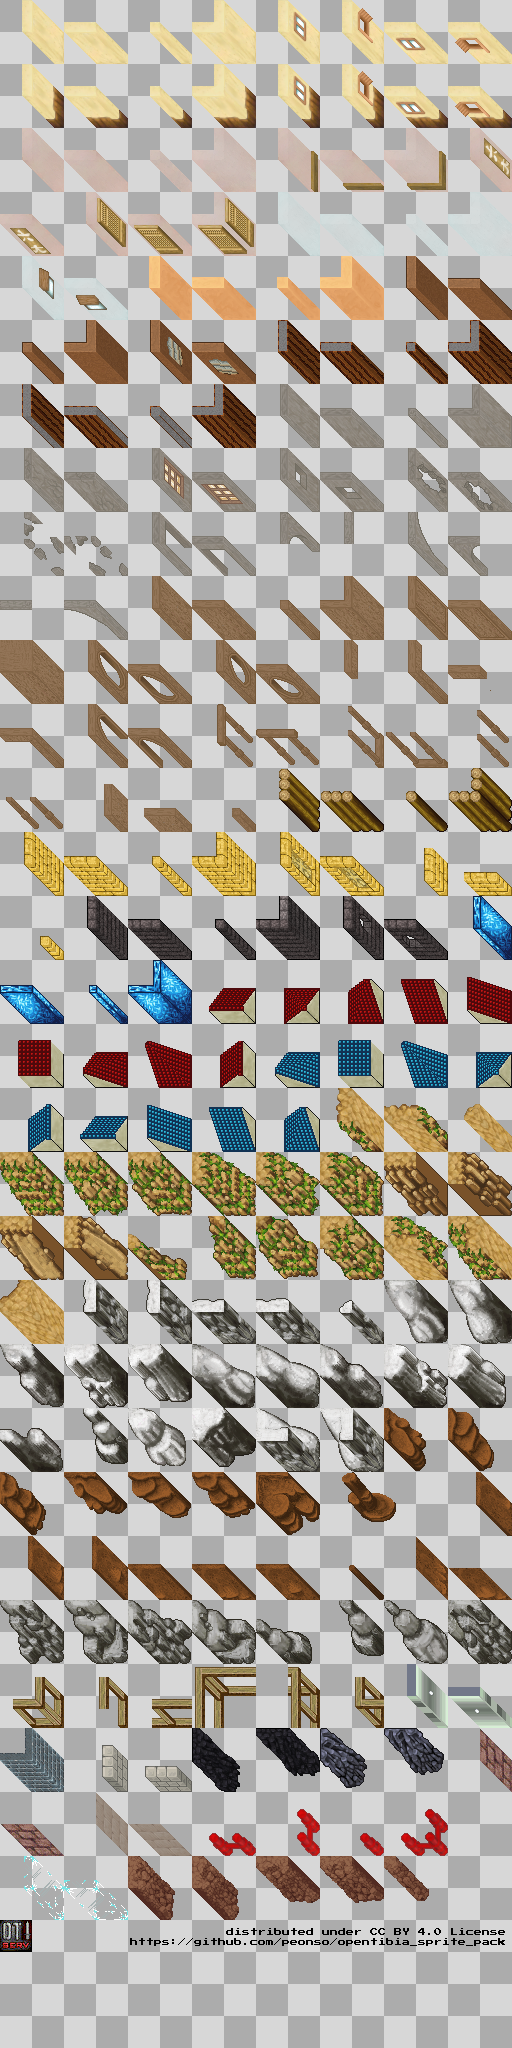
<style>
.page{position:relative;width:512px;height:2048px;background:#d7d7d7}
.page>*{position:absolute;margin:0}
.t1{font:8px "PressStart2P";color:#000000}
</style>
<div class="page">
<p class="t1" style="left:130px;top:1928px;width:375px;height:18px;text-align:right">distributed under CC BY 4.0 License<br>https://github.com/peonso/opentibia_sprite_pack</p>
</div>
